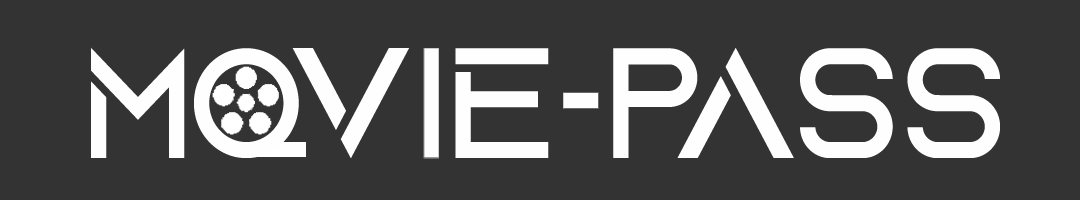
<style>
.page{position:relative;width:1080px;height:200px;background:#333333}
.page>*{position:absolute;margin:0}
.t1{font:164.9px "AquireRegular";color:#fefefe;scale:0.95 1}
</style>
<div class="page">
<p class="t1" style="left:91px;top:47px;width:909px;height:112px">movie-pass</p>
</div>
